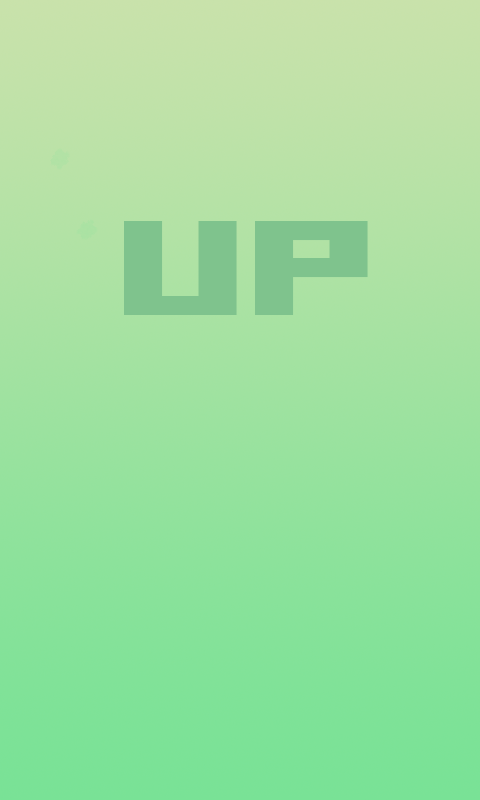
<style>
.page{position:relative;width:480px;height:800px}
.page>*{position:absolute;margin:0}
.t1{font:150px "Xpdr05";color:#7fc38d}
</style>
<div class="page">
<p class="t1" style="left:124px;top:221px;width:244px;height:94px">UP</p>
</div>
